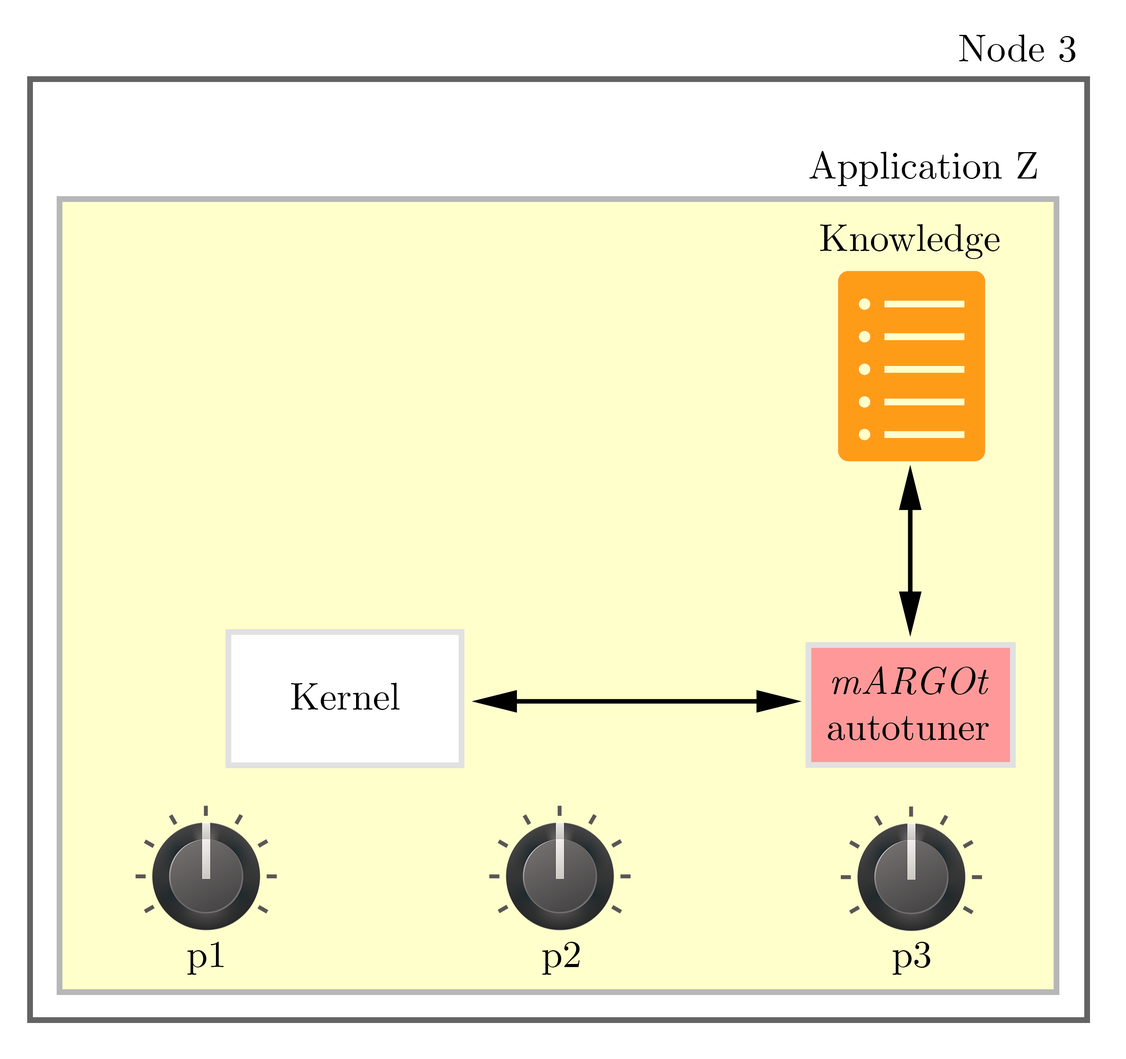
<style>
.page{position:relative;width:1126px;height:1059px;background:#ffffcc}
.page>*{position:absolute;margin:0}
.t1{font:38.3px "CMUSerif-Roman";color:#000000}
.t2{font:38.3px "CMUSerif-Italic";color:#000000}
</style>
<div class="page">
<p class="t1" style="left:959px;top:34px;width:117px;height:28px">Node 3</p>
<p class="t1" style="left:810px;top:151px;width:227px;height:35px">Application Z</p>
<p class="t1" style="left:820px;top:224px;width:180px;height:35px">Knowledge</p>
<p class="t1" style="left:828px;top:666px;width:161px;height:74px;text-align:center"><span class="t2">mARGOt<br></span>autotuner</p>
<p class="t1" style="left:291px;top:683px;width:109px;height:27px">Kernel</p>
<p class="t1" style="left:187px;top:941px;width:37px;height:33px">p1</p>
<p class="t1" style="left:542px;top:941px;width:38px;height:33px">p2</p>
<p class="t1" style="left:893px;top:941px;width:38px;height:33px">p3</p>
</div>
